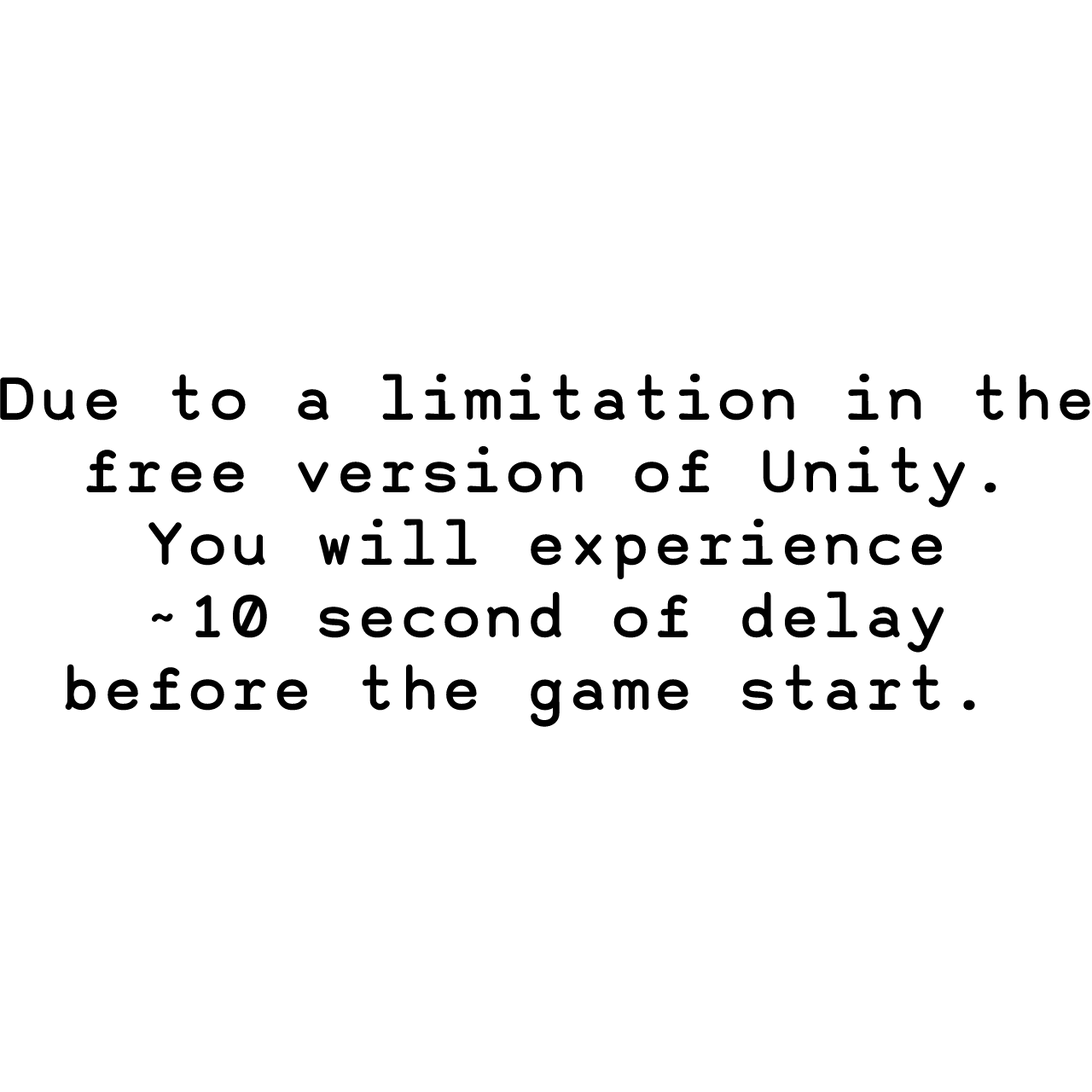
<style>
.page{position:relative;width:1092px;height:1092px;background:#ffffff}
.page>*{position:absolute;margin:0}
.t1{font:60.4px "AlmaMono-Bold";color:#000000}
</style>
<div class="page">
<p class="t1" style="left:0px;top:374px;width:1090px;height:353px;text-align:center">Due to a limitation in the<br>free version of Unity.<br>You will experience<br>~10 second of delay<br>before the game start.</p>
</div>
